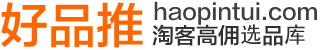
<style>
.page{position:relative;width:320px;height:50px;background:#ffffff}
.page>*{position:absolute;margin:0}
.t1{font:48px "FZLTZHB--B51-0";color:#ff6600}
.t2{font:22px "FZLTZHB--B51-0";color:#3f3f3f}
.t3{font:22px "FZLTZHB--B51-0";color:#303030}
.t4{font:22px "AdobeHeitiStd-Regular";color:#303030}
</style>
<div class="page">
<p class="t1" style="left:1px;top:2px;width:142px;height:46px">好品推</p>
<p class="t2" style="left:154px;top:1px;width:163px;height:24px">haopintui.com</p>
<p class="t3" style="left:152px;top:24px;width:153px;height:22px">淘客高佣<span class="t4">选</span>品<span class="t4">库</span></p>
</div>
